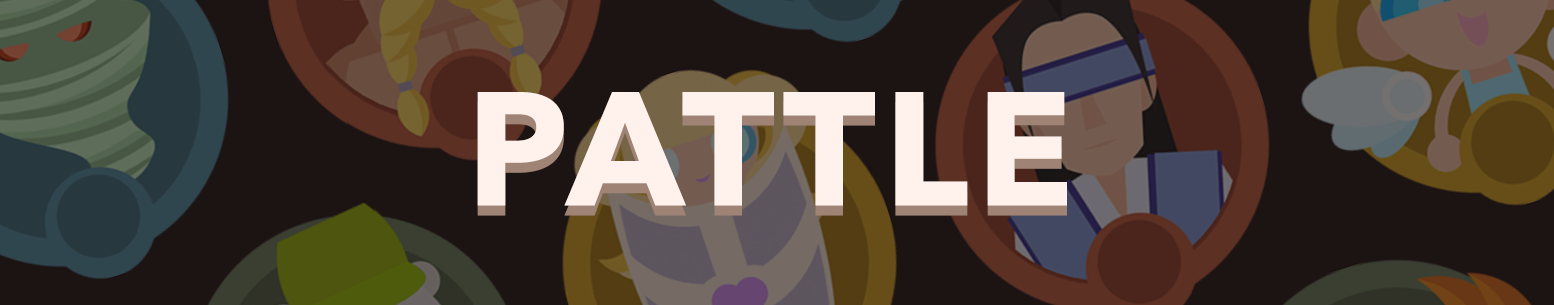
<style>
.page{position:relative;width:1554px;height:305px;background:#1c1313}
.page>*{position:absolute;margin:0}
.t1{font:160px "AvenirNext-Bold";letter-spacing:0.05em;color:#fff2ec}
</style>
<div class="page">
<p class="t1" style="left:477px;top:102px;width:590px;height:114px">PATTLE</p>
<p class="t1" style="left:477px;top:92px;width:590px;height:114px">PATTLE</p>
</div>
